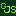
<style>
.page{position:relative;width:16px;height:16px;background:#023418}
.page>*{position:absolute;margin:0}
.t1{font:8px "NexaLight";color:#96bd4b}
.t2{font:9px "NexaBold";color:#b3e036}
</style>
<div class="page">
<p class="t1" style="left:1px;top:3px;width:5px;height:6px">G</p>
<p class="t2" style="left:4px;top:6px;width:12px;height:7px">JS</p>
</div>
